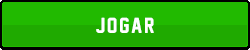
<style>
.page{position:relative;width:250px;height:50px;background:#21ba00}
.page>*{position:absolute;margin:0}
.t1{font:20px "Jetpackia";letter-spacing:0.1em;color:#ffffff;text-transform:uppercase}
</style>
<div class="page">
<p class="t1" style="left:96px;top:17px;width:58px;height:16px">Jogar</p>
</div>
